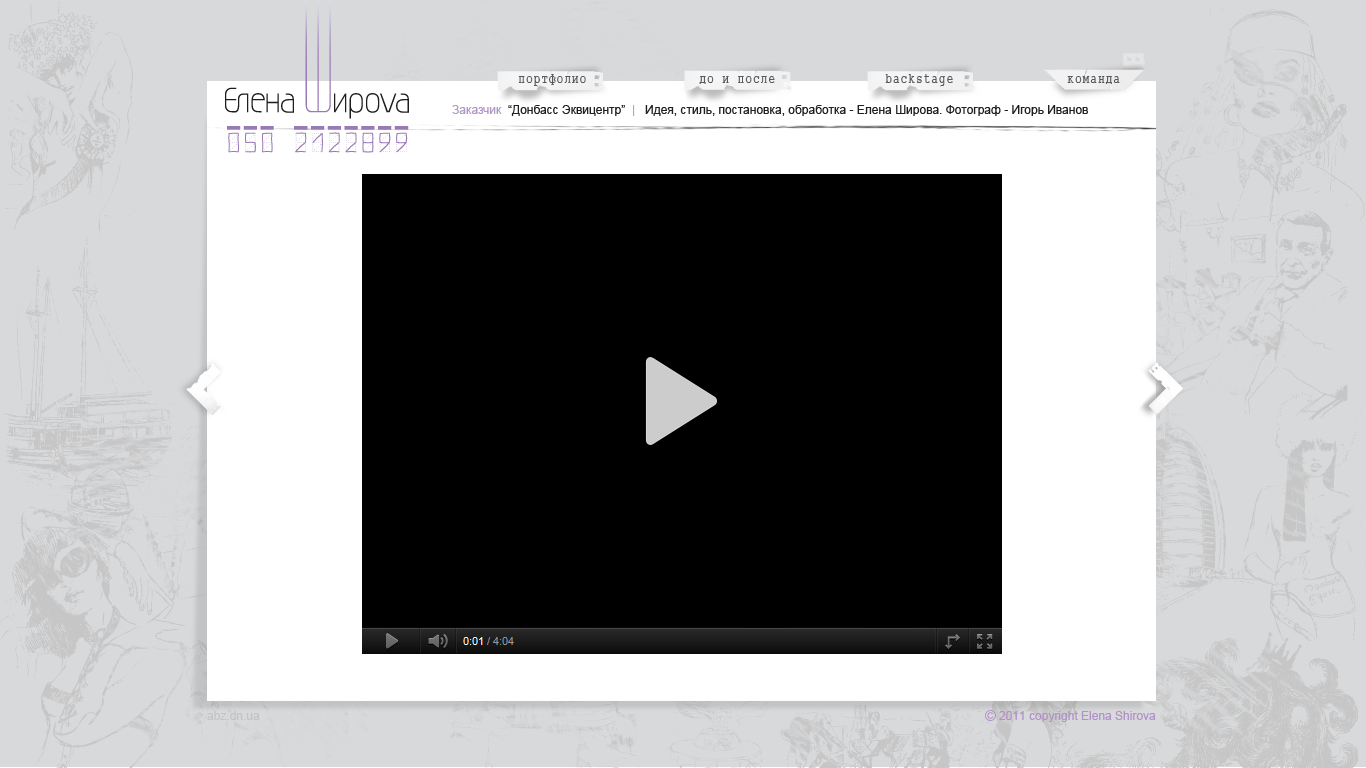
<style>
.page{position:relative;width:1366px;height:768px;background:#d8d9db}
.page>*{position:absolute;margin:0}
.t1{font:14px "ABCTypeWriterRussian";color:#58595b}
.t2{font:12px "ArialMT";color:#231f20}
.t3{font:12px "ArialMT";color:#af98c5}
.t4{font:12px "ArialMT";color:#adadad}
.t5{font:12px "ArialMT";color:#c2c2c2}
.t6{font:12px "ArialMT";color:#b290c8}
</style>
<div class="page">
<p class="t1" style="left:518px;top:74px;width:68px;height:13px">портфолио</p>
<p class="t1" style="left:699px;top:76px;width:76px;height:8px">до и после</p>
<p class="t1" style="left:885px;top:74px;width:68px;height:13px">backstage</p>
<p class="t1" style="left:1067px;top:76px;width:53px;height:8px">команда</p>
<p class="t2" style="left:452px;top:105px;width:636px;height:11px"><span class="t3">Заказчик  </span>“Донбасс Эквицентр”  <span class="t4">|</span>   Идея, стиль, постановка, обработка - Елена Широва. Фотограф - Игорь Иванов</p>
<p class="t5" style="left:207px;top:711px;width:53px;height:9px">abz.dn.ua</p>
<p class="t6" style="left:999px;top:711px;width:157px;height:11px">2011 copyright Elena Shirova</p>
</div>
